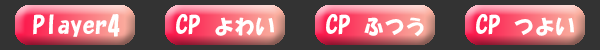
<style>
.page{position:relative;width:600px;height:50px;background:#333333}
.page>*{position:absolute;margin:0}
.t1{font:25px "HGSoeiKakupoptai";color:#ffffff}
.t2{font:20.8px "HGSoeiKakupoptai";color:#ffffff}
</style>
<div class="page">
<p class="t1" style="left:33px;top:14px;width:87px;height:23px">Player4</p>
<p class="t2" style="left:176px;top:14px;width:98px;height:22px"><span class="t1">CP </span>よわい</p>
<p class="t2" style="left:326px;top:14px;width:98px;height:23px"><span class="t1">CP </span>ふつう</p>
<p class="t2" style="left:476px;top:14px;width:98px;height:22px"><span class="t1">CP </span>つよい</p>
</div>
